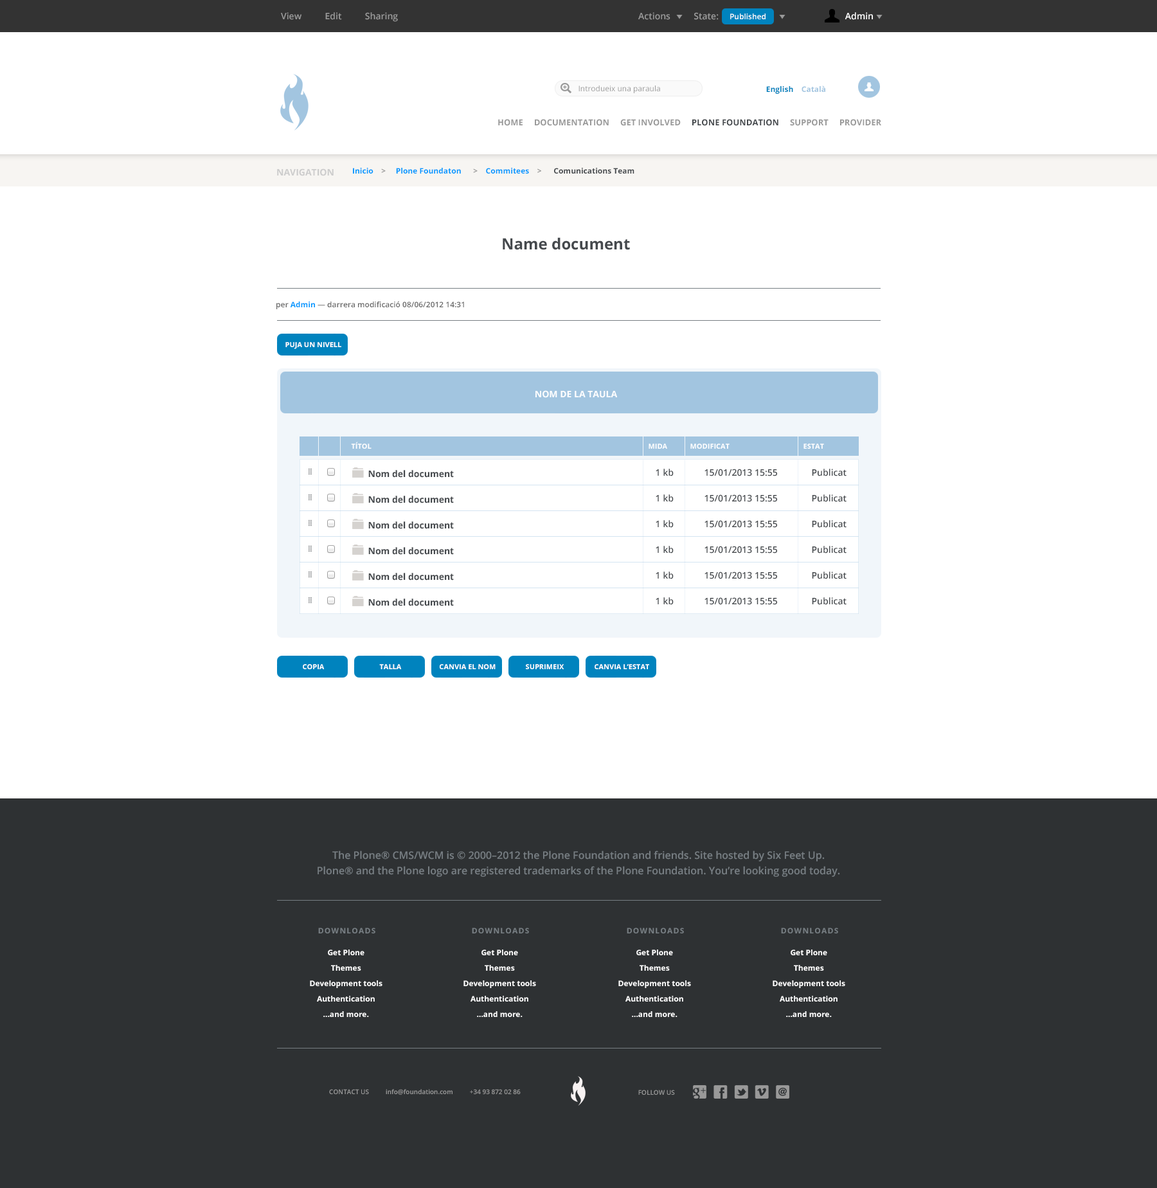
<style>
.page{position:relative;width:1157px;height:1188px;background:#ffffff}
.page>*{position:absolute;margin:0}
.t1{font:9px "OpenSans-Semibold";color:#999999}
.t2{font:7.7px "OpenSans-Semibold";color:#ffffff}
.t3{font:9px "OpenSans-Semibold";color:#ffffff}
.t4{font:7.7px "OpenSans";color:#999999}
.t5{font:7.7px "OpenSans-Bold";color:#0083be}
.t6{font:7.7px "OpenSans-Bold";color:#a2c5e0}
.t7{font:8.4px "OpenSans-Bold";color:#999999}
.t8{font:8.4px "OpenSans-Bold";color:#45494d}
.t9{font:9px "OpenSans-Bold";color:#cccccc}
.t10{font:7.7px "OpenSans-Bold";color:#45494d}
.t11{font:7.7px "OpenSans-Bold";color:#0099ff}
.t12{font:7.7px "OpenSans-Bold";color:#999999}
.t13{font:15.4px "OpenSans-Bold";color:#45494d}
.t14{font:7.7px "OpenSans-Semibold";color:#666666}
.t15{font:7.1px "OpenSans-Bold";color:#ffffff}
.t16{font:9px "OpenSans-Bold";color:#ffffff}
.t17{font:9px "OpenSans-Bold";color:#45494d}
.t18{font:9px "OpenSans-Semibold";color:#45494d}
.t19{font:10.3px/15.4px "OpenSans-Semibold";color:#777e83}
.t20{font:7.7px "OpenSans-Bold";letter-spacing:0.1em;color:#777e83}
.t21{font:7.7px/15.4px "OpenSans-Bold";color:#ffffff}
.t22{font:6.4px "OpenSans-Semibold";color:#999999}
.t23{font:6.4px "OpenSans-Semibold";color:#999999;text-transform:uppercase}
</style>
<div class="page">
<p class="t1" style="left:281px;top:12px;width:117px;height:10px">View          Edit          Sharing</p>
<p class="t1" style="left:638px;top:12px;width:81px;height:8px">Actions          State:</p>
<p class="t2" style="left:730px;top:14px;width:36px;height:5px">Published</p>
<p class="t3" style="left:845px;top:12px;width:28px;height:8px">Admin</p>
<p class="t4" style="left:579px;top:86px;width:81px;height:7px">Introdueix una paraula</p>
<p class="t5" style="left:766px;top:86px;width:59px;height:8px">English<span class="t6">    Català</span></p>
<p class="t7" style="left:498px;top:119px;width:383px;height:7px">HOME     DOCUMENTATION     GET INVOLVED     <span class="t8">PLONE FOUNDATION</span>     SUPPORT     PROVIDER</p>
<p class="t9" style="left:277px;top:168px;width:57px;height:8px">NAVIGATION</p>
<p class="t10" style="left:353px;top:168px;width:281px;height:6px"><span class="t11">Inicio  </span><span class="t12">  &gt;     </span><span class="t11">Plone Foundaton </span><span class="t12">     &gt;    </span><span class="t11">Commitees </span><span class="t12">   &gt;      </span>Comunications Team</p>
<p class="t13" style="left:503px;top:237px;width:127px;height:13px">Name document</p>
<p class="t14" style="left:276px;top:301px;width:188px;height:8px">per <span class="t11">Admin</span> — darrera modificació 08/06/2012 14:31</p>
<p class="t15" style="left:285px;top:342px;width:56px;height:7px">PUJA UN NIVELL</p>
<p class="t16" style="left:536px;top:390px;width:82px;height:8px">NOM DE LA TAULA</p>
<p class="t15" style="left:351px;top:442px;width:21px;height:7px">TÍTOL</p>
<p class="t15" style="left:649px;top:444px;width:18px;height:5px">MIDA</p>
<p class="t15" style="left:690px;top:444px;width:40px;height:5px">MODIFICAT</p>
<p class="t15" style="left:804px;top:444px;width:20px;height:5px">ESTAT</p>
<p class="t17" style="left:368px;top:470px;width:86px;height:8px">Nom del document</p>
<p class="t18" style="left:656px;top:469px;width:18px;height:7px">1 kb</p>
<p class="t18" style="left:705px;top:469px;width:72px;height:7px">15/01/2013 15:55</p>
<p class="t18" style="left:812px;top:469px;width:35px;height:7px">Publicat</p>
<p class="t17" style="left:368px;top:496px;width:86px;height:7px">Nom del document</p>
<p class="t18" style="left:656px;top:494px;width:18px;height:8px">1 kb</p>
<p class="t18" style="left:705px;top:494px;width:72px;height:8px">15/01/2013 15:55</p>
<p class="t18" style="left:812px;top:494px;width:35px;height:8px">Publicat</p>
<p class="t17" style="left:368px;top:521px;width:86px;height:8px">Nom del document</p>
<p class="t18" style="left:656px;top:520px;width:18px;height:8px">1 kb</p>
<p class="t18" style="left:705px;top:520px;width:72px;height:8px">15/01/2013 15:55</p>
<p class="t18" style="left:812px;top:520px;width:35px;height:8px">Publicat</p>
<p class="t18" style="left:656px;top:546px;width:18px;height:8px">1 kb</p>
<p class="t18" style="left:705px;top:546px;width:72px;height:8px">15/01/2013 15:55</p>
<p class="t18" style="left:812px;top:546px;width:35px;height:8px">Publicat</p>
<p class="t17" style="left:368px;top:547px;width:86px;height:8px">Nom del document</p>
<p class="t17" style="left:368px;top:573px;width:86px;height:7px">Nom del document</p>
<p class="t18" style="left:656px;top:572px;width:18px;height:7px">1 kb</p>
<p class="t18" style="left:705px;top:572px;width:72px;height:7px">15/01/2013 15:55</p>
<p class="t18" style="left:812px;top:572px;width:35px;height:7px">Publicat</p>
<p class="t17" style="left:368px;top:598px;width:86px;height:8px">Nom del document</p>
<p class="t18" style="left:656px;top:597px;width:18px;height:8px">1 kb</p>
<p class="t18" style="left:705px;top:597px;width:72px;height:8px">15/01/2013 15:55</p>
<p class="t18" style="left:812px;top:597px;width:35px;height:8px">Publicat</p>
<p class="t15" style="left:303px;top:664px;width:22px;height:5px">COPIA</p>
<p class="t15" style="left:379px;top:664px;width:23px;height:5px">TALLA</p>
<p class="t15" style="left:440px;top:664px;width:56px;height:5px">CANVIA EL NOM</p>
<p class="t15" style="left:526px;top:664px;width:38px;height:5px">SUPRIMEIX</p>
<p class="t15" style="left:595px;top:664px;width:54px;height:5px">CANVIA L’ESTAT</p>
<p class="t19" style="left:318px;top:851px;width:522px;height:26px;text-align:center">The Plone® CMS/WCM is © 2000–2012 the Plone Foundation and friends. Site hosted by Six Feet Up.<br>Plone® and the Plone logo are registered trademarks of the Plone Foundation. You’re looking good today.</p>
<p class="t20" style="left:318px;top:928px;width:57px;height:5px">DOWNLOADS</p>
<p class="t20" style="left:472px;top:928px;width:57px;height:5px">DOWNLOADS</p>
<p class="t20" style="left:627px;top:928px;width:57px;height:5px">DOWNLOADS</p>
<p class="t20" style="left:781px;top:928px;width:57px;height:5px">DOWNLOADS</p>
<p class="t21" style="left:310px;top:950px;width:72px;height:67px;text-align:center">Get Plone<br>    Themes<br>    Development tools<br>    Authentication<br>    …and more.</p>
<p class="t21" style="left:464px;top:950px;width:72px;height:67px;text-align:center">Get Plone<br>    Themes<br>    Development tools<br>    Authentication<br>    …and more.</p>
<p class="t21" style="left:618px;top:950px;width:73px;height:67px;text-align:center">Get Plone<br>    Themes<br>    Development tools<br>    Authentication<br>    …and more.</p>
<p class="t21" style="left:773px;top:950px;width:72px;height:67px;text-align:center">Get Plone<br>    Themes<br>    Development tools<br>    Authentication<br>    …and more.</p>
<p class="t22" style="left:329px;top:1089px;width:192px;height:6px">CONTACT US          info@foundation.com          +34 93 872 02 86</p>
<p class="t23" style="left:638px;top:1090px;width:37px;height:5px">Follow us</p>
</div>
